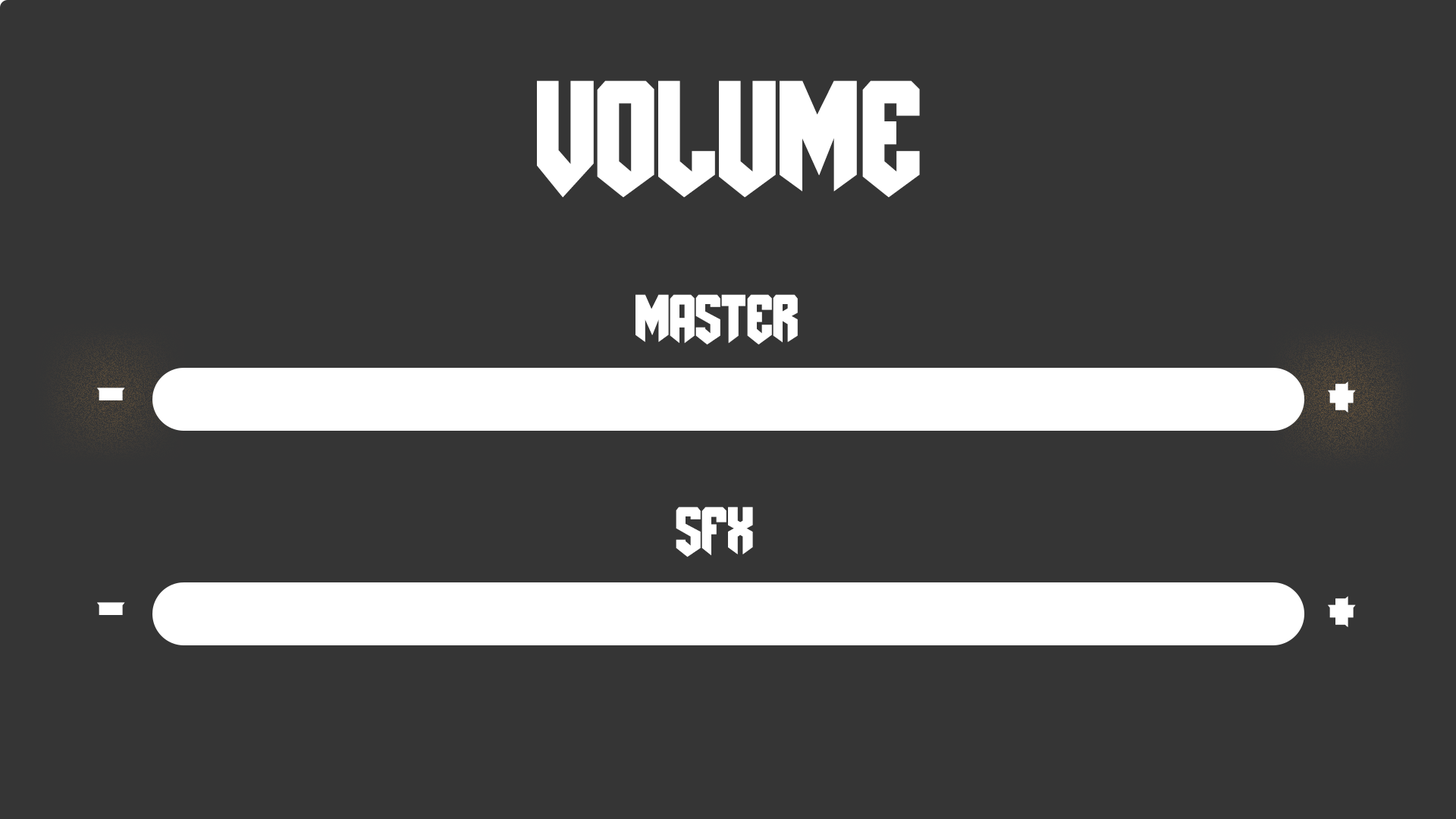
<style>
.page{position:relative;width:1456px;height:819px;background:#353535}
.page>*{position:absolute;margin:0}
.t1{font:186.4px "AmazDooMLeft";color:#ffffff}
.t2{font:79.2px "AmazDooMLeft";color:#ffffff}
.t3{font:104.3px "AmazDooMLeft";color:#ffffff}
</style>
<div class="page">
<p class="t1" style="left:537px;top:80px;width:383px;height:117px">volume</p>
<p class="t2" style="left:635px;top:294px;width:163px;height:51px">master</p>
<p class="t3" style="left:97px;top:388px;width:28px;height:12px">-</p>
<p class="t3" style="left:1328px;top:381px;width:28px;height:32px">+</p>
<p class="t2" style="left:676px;top:507px;width:77px;height:50px">sfx</p>
<p class="t3" style="left:97px;top:602px;width:28px;height:13px">-</p>
<p class="t3" style="left:1328px;top:596px;width:28px;height:31px">+</p>
</div>
